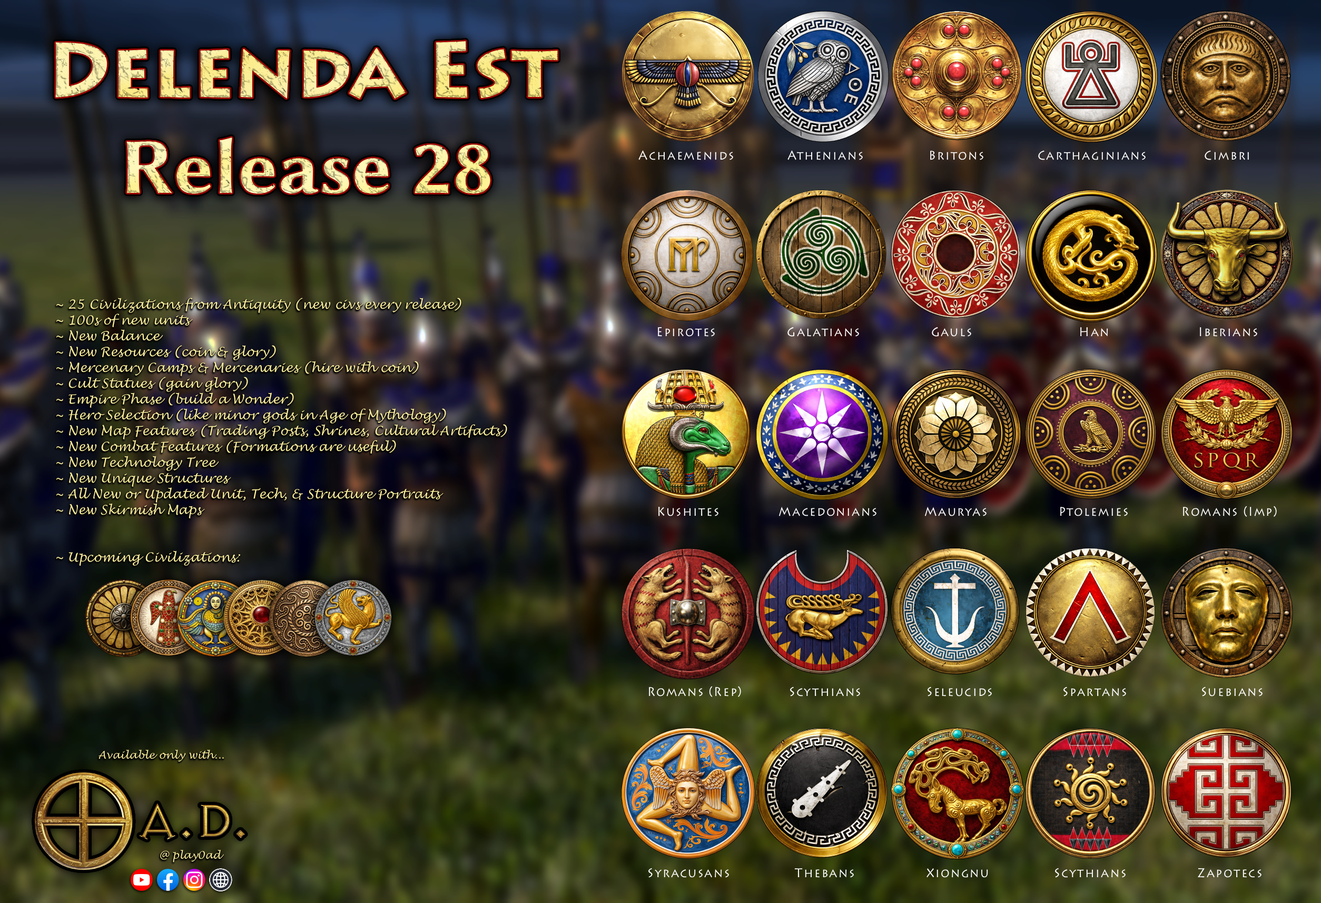
<style>
.page{position:relative;width:1321px;height:903px}
.page>*{position:absolute;margin:0}
.t1{font:77.2px "Lithos-Bold";color:#fbee9d}
.t2{font:79px "LinBiolinumOB";color:#fef5aa}
.t3{font:12.6px "Lithos";letter-spacing:0.1em;color:#ffffff;scale:0.9 1}
.t4{font:12.6px/15.8px "LucidaHandwriting-Italic";color:#fbee9d}
.t5{font:10.5px "LucidaHandwriting-Italic";color:#fbee9d}
</style>
<div class="page">
<p class="t1" style="left:55px;top:41px;width:503px;height:58px">Delenda Est</p>
<p class="t2" style="left:126px;top:137px;width:364px;height:57px">Release 28</p>
<p class="t3" style="left:638px;top:150px;width:611px;height:10px">Achaemenids         Athenians           Britons         Carthaginians          Cimbri</p>
<p class="t4" style="left:56px;top:298px;width:451px;height:268px">~ 25 Civilizations from Antiquity (new civs every release)<br>~ 100s of new units<br>~ New Balance<br>~ New Resources (coin &amp; glory)<br>~ Mercenary Camps &amp; Mercenaries (hire with coin)<br>~ Cult Statues (gain glory)<br>~ Empire Phase (build a Wonder)<br>~ Hero Selection (like minor gods in Age of Mythology)<br>~ New Map Features (Trading Posts, Shrines, Cultural Artifacts)<br>~ New Combat Features (Formations are useful)<br>~ New Technology Tree<br>~ New Unique Structures <br>~ All New or Updated Unit, Tech, &amp; Structure Portraits<br>~ New Skirmish Maps<br><br><br>~ Upcoming Civilizations:</p>
<p class="t3" style="left:658px;top:327px;width:599px;height:10px">Epirotes            Galatians            Gauls                  Han               Iberians</p>
<p class="t3" style="left:658px;top:506px;width:619px;height:11px">Kushites          Macedonians        Mauryas            Ptolemies         Romans (Imp)</p>
<p class="t3" style="left:649px;top:686px;width:613px;height:11px">Romans (Rep)        Scythians           Seleucids            Spartans             Suebians</p>
<p class="t5" style="left:98px;top:749px;width:126px;height:13px">Available only with...</p>
<p class="t5" style="left:160px;top:849px;width:64px;height:13px">@ play0ad</p>
<p class="t3" style="left:648px;top:867px;width:613px;height:10px">Syracusans           Thebans            Xiongnu           Scythians            Zapotecs</p>
</div>
